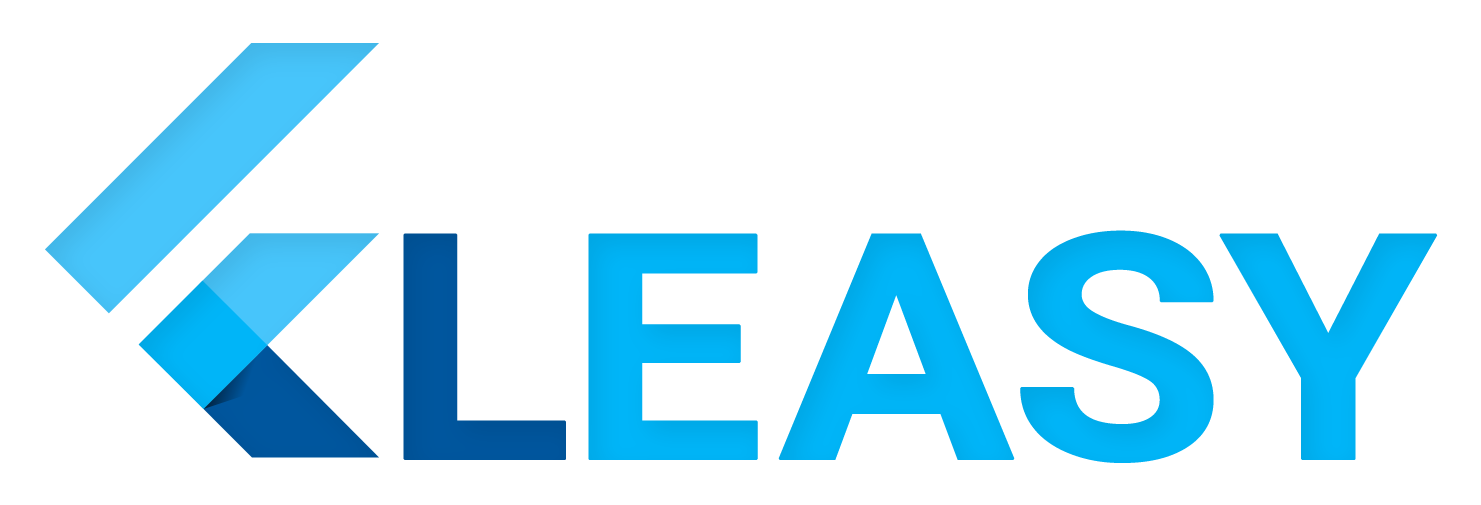
<style>
.page{position:relative;width:1481px;height:505px;background:#ffffff}
.page>*{position:absolute;margin:0}
.t1{font:315px "Roboto-Bold";letter-spacing:-0.04em;color:#00b5f8;font-weight:bold;scale:1.11 1}
.t2{font:315px "Roboto-Bold";letter-spacing:-0.04em;color:#00569e;font-weight:bold;scale:1.11 1}
</style>
<div class="page">
<p class="t1" style="left:403px;top:230px;width:1035px;height:233px"><span class="t2">L</span>E ASY</p>
</div>
